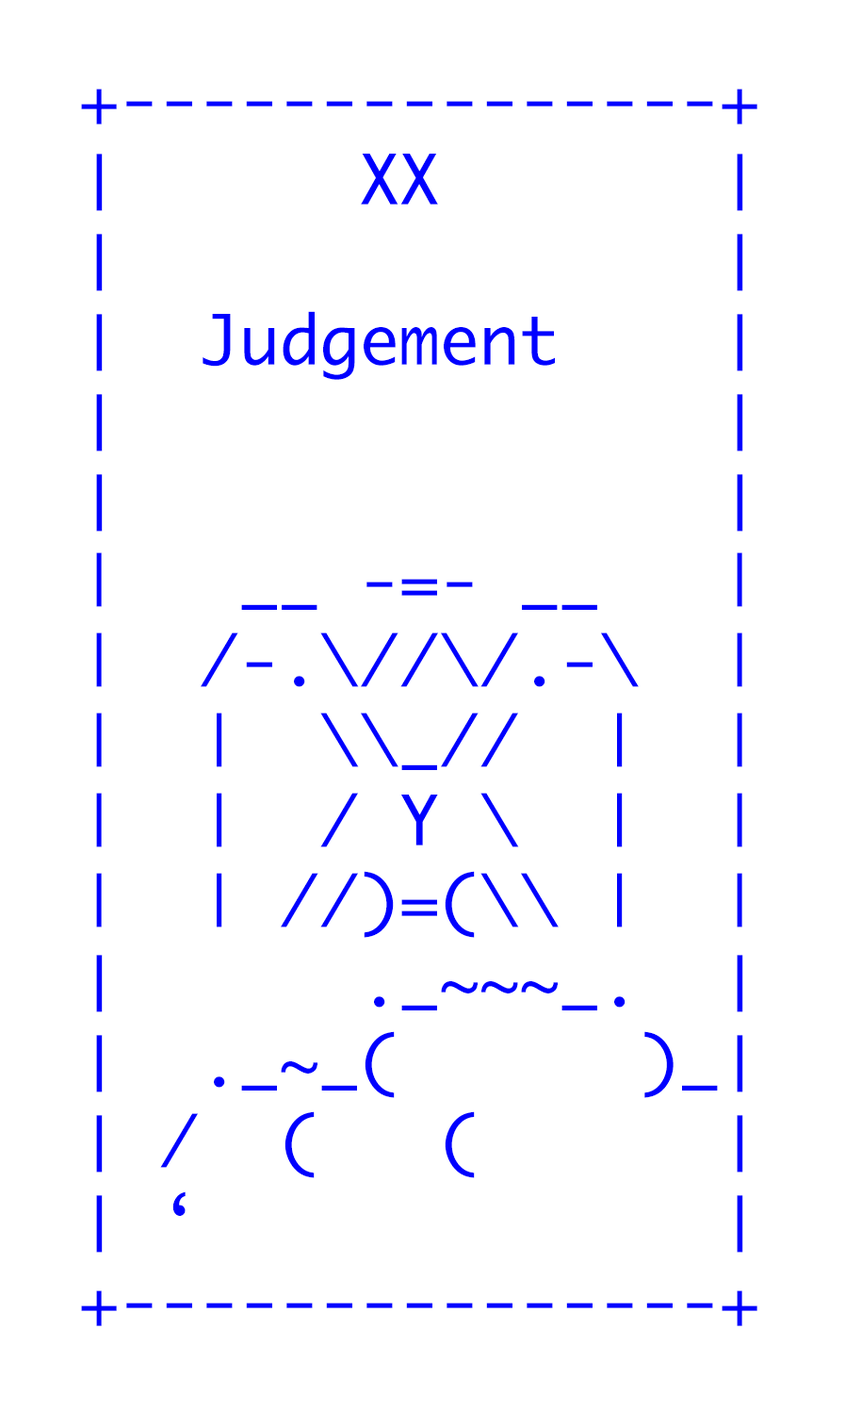
<style>
.page{position:relative;width:845px;height:1411px;background:#ffffff}
.page>*{position:absolute;margin:0}
.t1{font:66.7px "Monaco";color:#0000ff}
</style>
<div class="page">
<p class="t1" style="left:81px;top:89px;width:677px;height:1237px">+---------------+<br>│      XX       │<br>│               │<br>│  Judgement    │<br>│               │<br>│               │<br>|   __ -=- __   |<br>|  /-.\//\/.-\  |<br>|  |  \\_//  |  |<br>|  |  / Y \  |  |<br>|  | //)=(\\ |  |<br>│      ._~~~_.  │<br>│  ._~_(      )_│<br>│ /  (   (      │<br>│ ‘             │<br>+---------------+</p>
</div>
